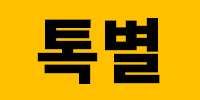
<style>
.page{position:relative;width:200px;height:100px;background:#ffc000}
.page>*{position:absolute;margin:0}
.t1{font:70px "NotoSansKR-Black";color:#010101;text-transform:uppercase}
</style>
<div class="page">
<p class="t1" style="left:37px;top:18px;width:123px;height:66px">톡별</p>
</div>
